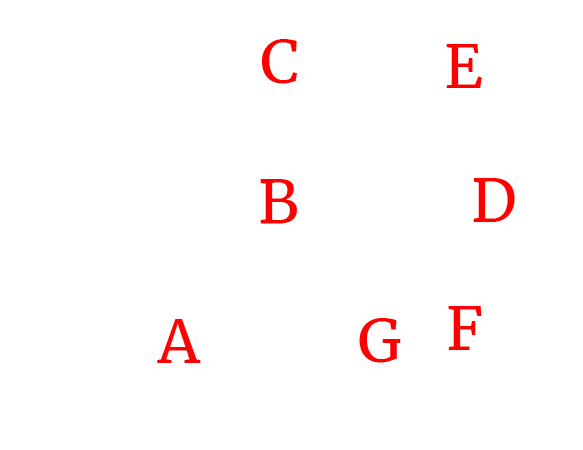
<style>
.page{position:relative;width:583px;height:450px;background:#ffffff}
.page>*{position:absolute;margin:0}
.t1{font:60px "Merriweather-Regular";color:#ff0000}
</style>
<div class="page">
<p class="t1" style="left:262px;top:39px;width:35px;height:45px">C</p>
<p class="t1" style="left:446px;top:44px;width:36px;height:44px">E</p>
<p class="t1" style="left:260px;top:179px;width:37px;height:45px">B</p>
<p class="t1" style="left:473px;top:178px;width:42px;height:44px">D</p>
<p class="t1" style="left:359px;top:318px;width:42px;height:45px">G</p>
<p class="t1" style="left:448px;top:306px;width:34px;height:44px">F</p>
<p class="t1" style="left:157px;top:319px;width:44px;height:44px">A</p>
</div>
